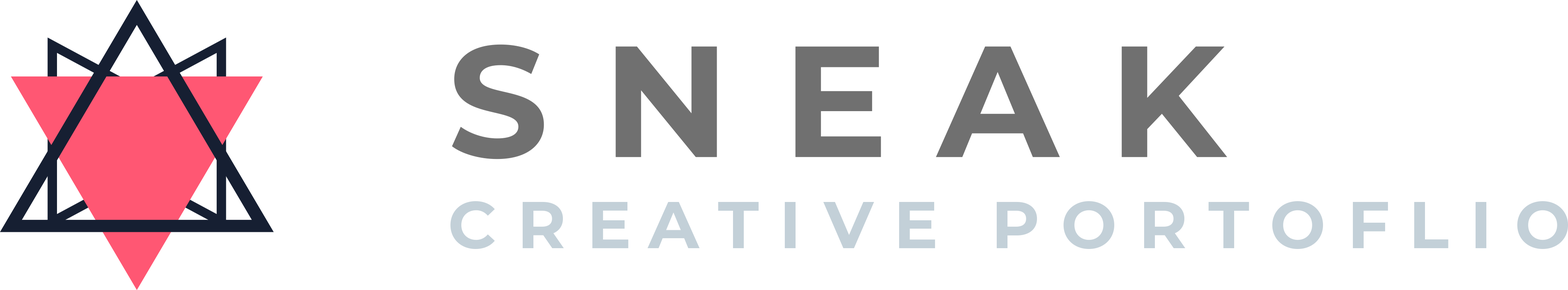
<style>
.page{position:relative;width:1568px;height:290px;background:#ffffff}
.page>*{position:absolute;margin:0}
.t1{font:157.4px "Montserrat-Bold";letter-spacing:0.3em;color:#707070;font-weight:bold}
.t2{font:66.3px "Montserrat-Bold";letter-spacing:0.3em;color:#c3d0d8}
</style>
<div class="page">
<p class="t1" style="left:452px;top:44px;width:775px;height:115px">SNEAK</p>
<p class="t2" style="left:450px;top:201px;width:1118px;height:48px">CREATIVE PORTOFLIO</p>
</div>
